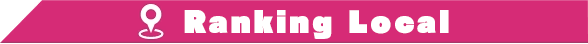
<style>
.page{position:relative;width:588px;height:44px;background:#d62b76}
.page>*{position:absolute;margin:0}
.t1{font:29.3px "RaglanStd-UB";letter-spacing:0.093em;color:#ffffff}
</style>
<div class="page">
<p class="t1" style="left:184px;top:10px;width:265px;height:29px">Ranking Local</p>
</div>
